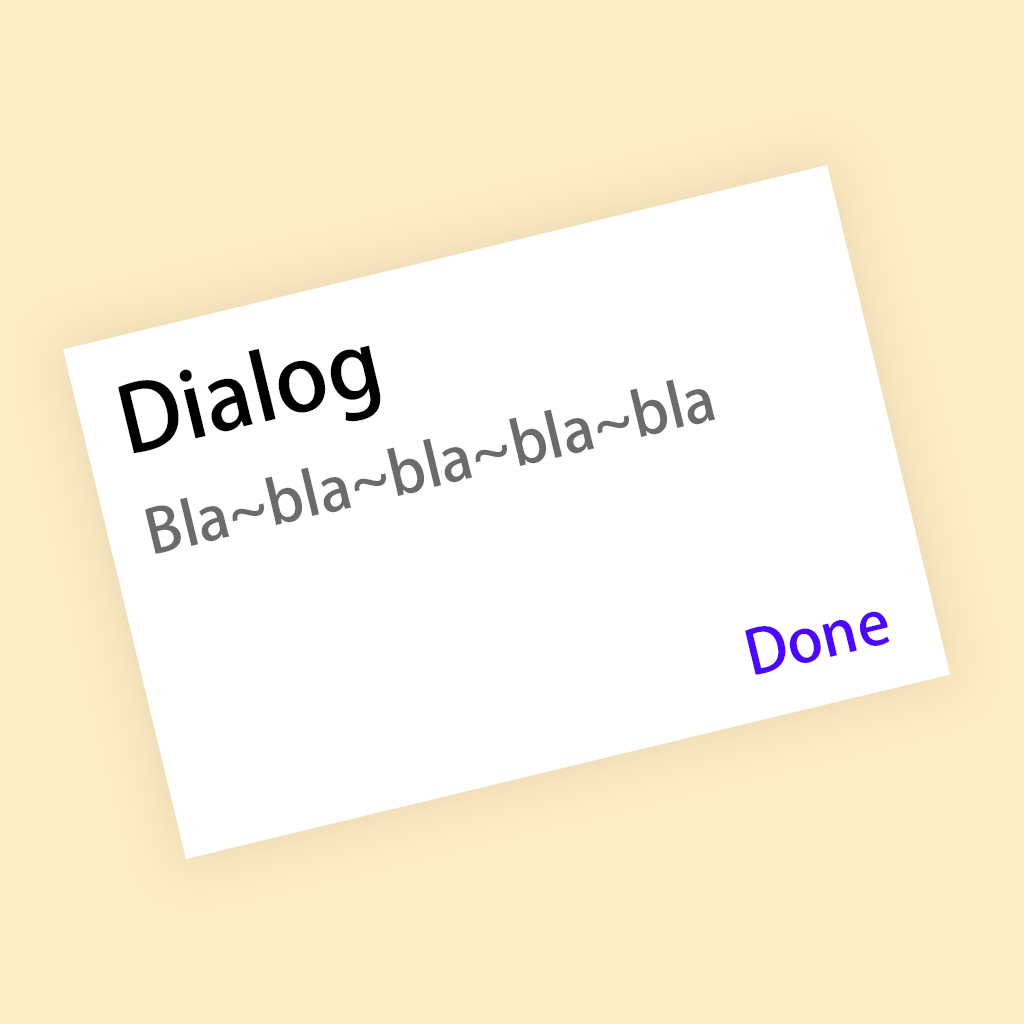
<style>
.page{position:relative;width:1024px;height:1024px;background:#ffecc4}
.page>*{position:absolute;margin:0}
.t1{font:90px "AdobeHeitiStd-Regular";color:#000000}
.t2{font:60px "AdobeHeitiStd-Regular";color:#6b6b6b}
.t3{font:60px "AdobeHeitiStd-Regular";color:#4d07ff}
</style>
<div class="page">
<p class="t1" style="left:118px;top:345px;width:263px;height:109px;rotate:-14deg">Dialog</p>
<p class="t2" style="left:145px;top:379px;width:571px;height:175px;rotate:-14deg">Bla~bla~bla~bla~bla</p>
<p class="t3" style="left:745px;top:611px;width:145px;height:64px;rotate:-14deg">Done</p>
</div>
